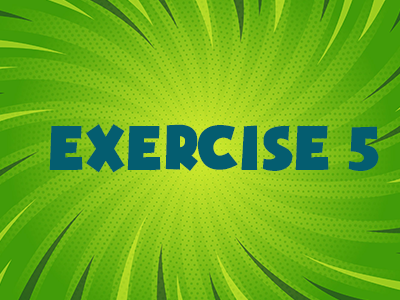
<style>
.page{position:relative;width:400px;height:300px}
.page>*{position:absolute;margin:0}
.t1{font:72px "iCielSoupofJustice";color:#045d70}
</style>
<div class="page">
<p class="t1" style="left:49px;top:124px;width:330px;height:49px">Exercise 5</p>
</div>
